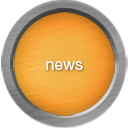
<style>
.page{position:relative;width:128px;height:128px;background:#ffffff}
.page>*{position:absolute;margin:0}
.t1{font:16.2px "HelveticaNeueLTPro-Roman";color:#ffffff}
</style>
<div class="page">
<p class="t1" style="left:46px;top:61px;width:37px;height:9px">news</p>
</div>
